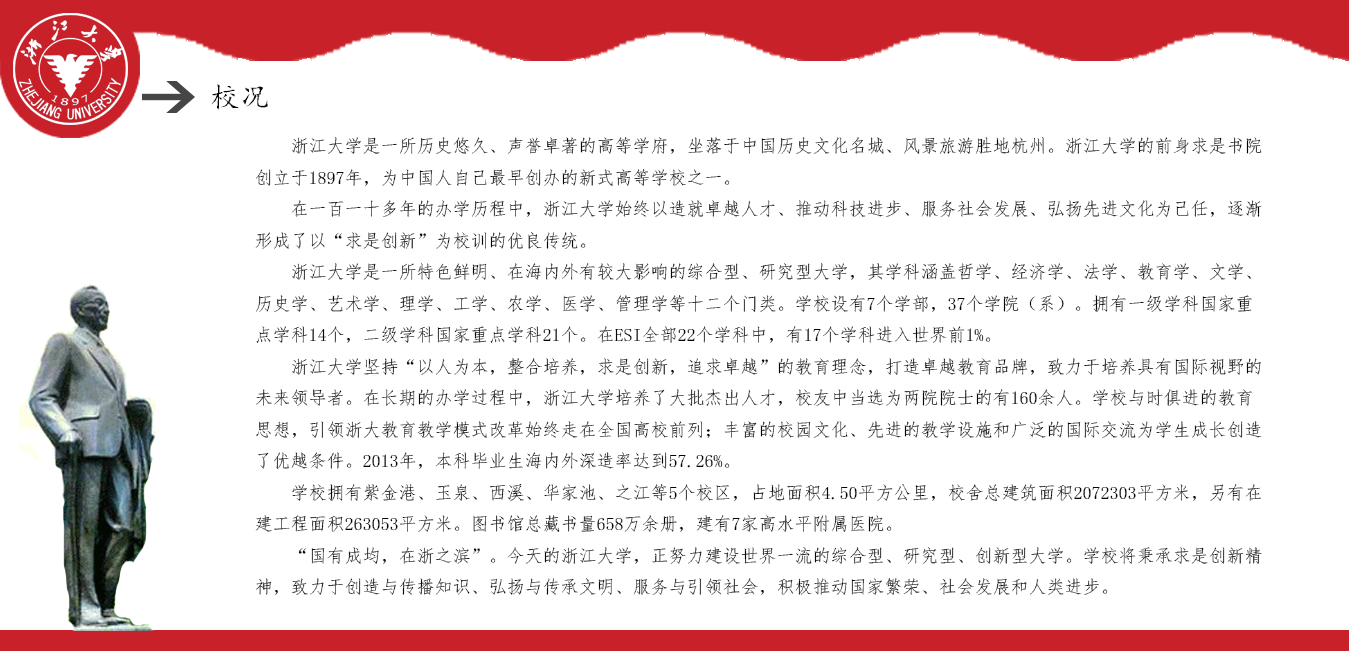
<style>
.page{position:relative;width:1349px;height:651px;background:#ffffff}
.page>*{position:absolute;margin:0}
.t1{font:30px "¿¬Ìå";color:#070707}
.t2{font:18px "·ÂËÎ";color:#040404}
</style>
<div class="page">
<p class="t1" style="left:211px;top:84px;width:57px;height:26px">校况</p>
<p class="t2" style="left:255px;top:137px;width:1007px;height:458px">浙江大学是一所历史悠久、声誉卓著的高等学府，坐落于中国历史文化名城、风景旅游胜地杭州。浙江大学的前身求是书院<br>创立于1897年，为中国人自己最早创办的新式高等学校之一。<br>    在一百一十多年的办学历程中，浙江大学始终以造就卓越人才、推动科技进步、服务社会发展、弘扬先进文化为己任，逐渐<br>形成了以“求是创新”为校训的优良传统。<br>    浙江大学是一所特色鲜明、在海内外有较大影响的综合型、研究型大学，其学科涵盖哲学、经济学、法学、教育学、文学、<br>历史学、艺术学、理学、工学、农学、医学、管理学等十二个门类。学校设有7个学部，37个学院（系）。拥有一级学科国家重<br>点学科14个，二级学科国家重点学科21个。在ESI全部22个学科中，有17个学科进入世界前1%。<br>    浙江大学坚持“以人为本，整合培养，求是创新，追求卓越”的教育理念，打造卓越教育品牌，致力于培养具有国际视野的<br>未来领导者。在长期的办学过程中，浙江大学培养了大批杰出人才，校友中当选为两院院士的有160余人。学校与时俱进的教育<br>思想，引领浙大教育教学模式改革始终走在全国高校前列；丰富的校园文化、先进的教学设施和广泛的国际交流为学生成长创造<br>了优越条件。2013年，本科毕业生海内外深造率达到57.26%。<br>    学校拥有紫金港、玉泉、西溪、华家池、之江等5个校区，占地面积4.50平方公里，校舍总建筑面积2072303平方米，另有在<br>建工程面积263053平方米。图书馆总藏书量658万余册，建有7家高水平附属医院。<br>    “国有成均，在浙之滨”。今天的浙江大学，正努力建设世界一流的综合型、研究型、创新型大学。学校将秉承求是创新精<br>神，致力于创造与传播知识、弘扬与传承文明、服务与引领社会，积极推动国家繁荣、社会发展和人类进步。</p>
</div>
